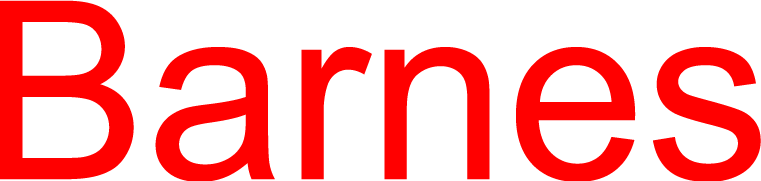
<style>
.page{position:relative;width:761px;height:181px;background:#ffffff}
.page>*{position:absolute;margin:0}
.t1{font:249.1px "ArialMT";color:#ff0000}
</style>
<div class="page">
<p class="t1" style="left:0px;top:0px;width:761px;height:182px">Barnes</p>
</div>
